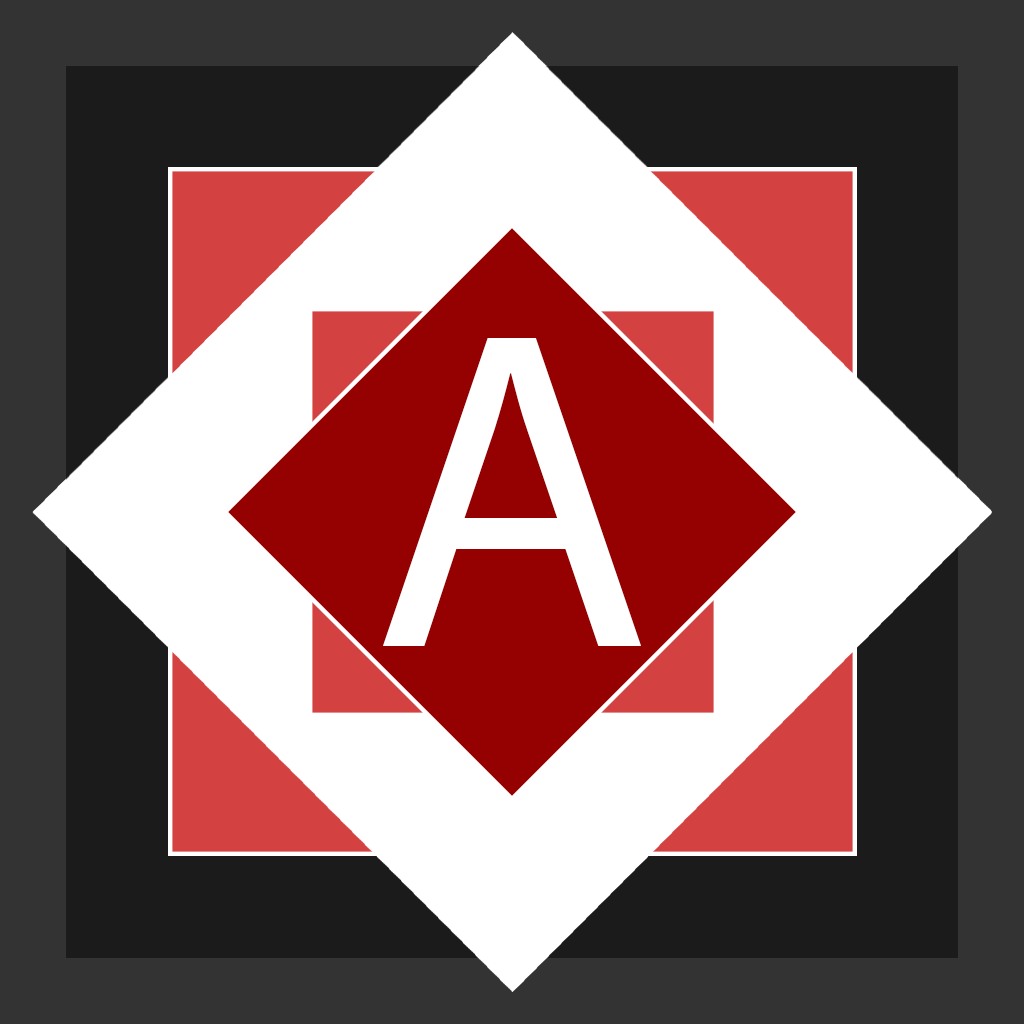
<style>
.page{position:relative;width:1024px;height:1024px;background:#ffffff}
.page>*{position:absolute;margin:0}
.t1{font:457.3px "MyriadPro-Regular";color:#ffffff}
</style>
<div class="page">
<p class="t1" style="left:383px;top:338px;width:258px;height:308px">A</p>
</div>
